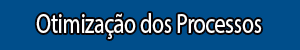
<style>
.page{position:relative;width:300px;height:50px;background:#004e8b}
.page>*{position:absolute;margin:0}
.t1{font:28.4px "MyriadPro-Regular";letter-spacing:-0.02em;color:#ffffff;scale:0.78 1}
</style>
<div class="page">
<p class="t1" style="left:36px;top:13px;width:226px;height:26px">Otimização dos Processos</p>
</div>
